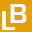
<style>
.page{position:relative;width:32px;height:32px;background:#e39f06}
.page>*{position:absolute;margin:0}
.t1{font:29px "EurostileBold";color:#ffffff}
</style>
<div class="page">
<p class="t1" style="left:10px;top:4px;width:17px;height:19px">B</p>
<p class="t1" style="left:2px;top:11px;width:13px;height:19px">L</p>
</div>
